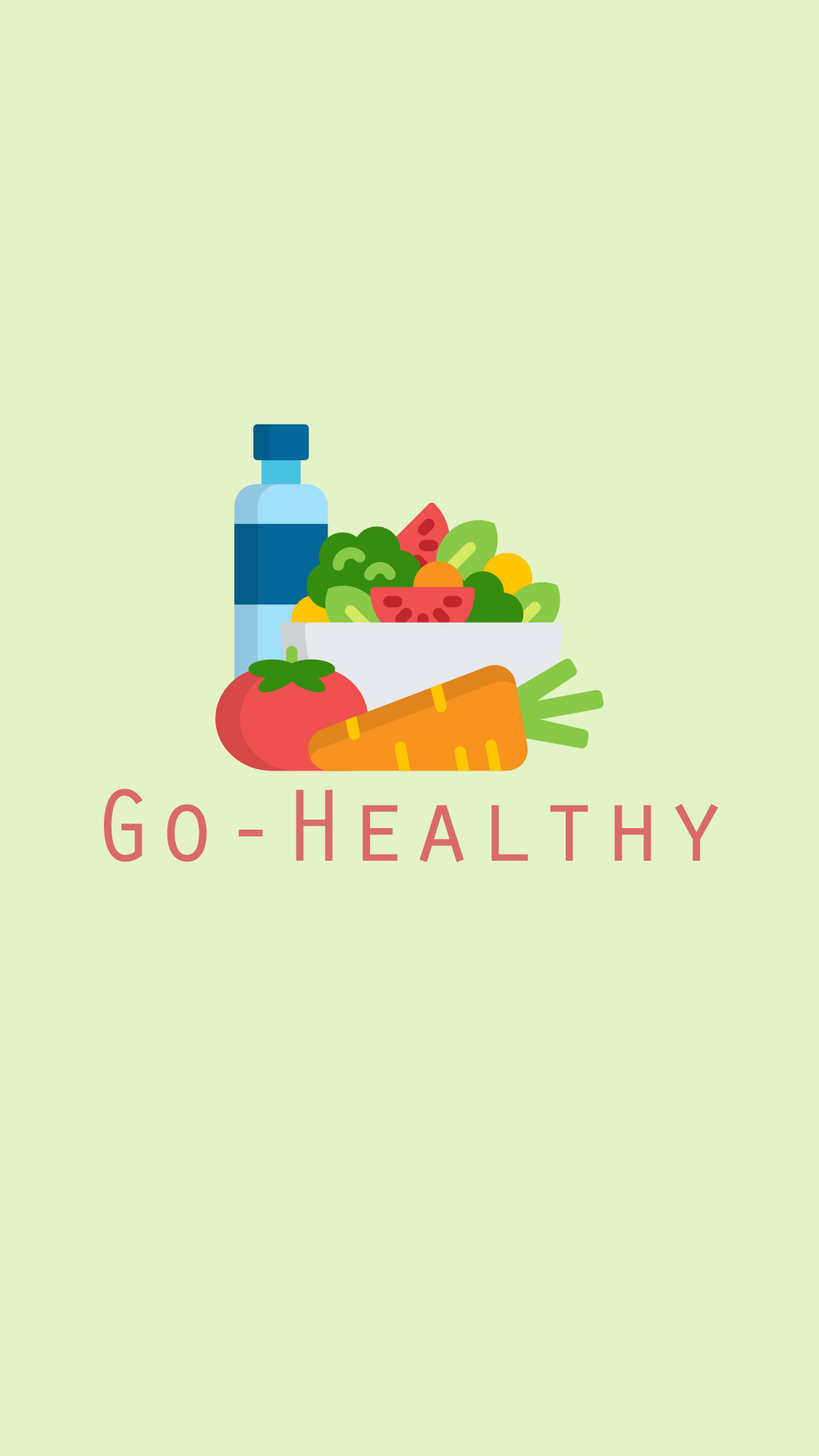
<style>
.page{position:relative;width:819px;height:1456px;background:#e3f3c7}
.page>*{position:absolute;margin:0}
.t1{font:106.2px "OratorStd";color:#da6a6a}
</style>
<div class="page">
<p class="t1" style="left:104px;top:789px;width:614px;height:73px">Go-Healthy</p>
</div>
